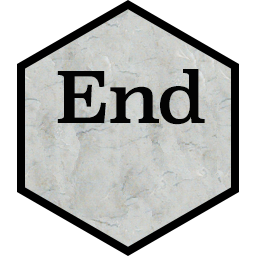
<style>
.page{position:relative;width:256px;height:256px;background:#ffffff}
.page>*{position:absolute;margin:0}
.t1{font:70px "Superclarendon-Regular";letter-spacing:-0.025em;color:#030303}
</style>
<div class="page">
<p class="t1" style="left:57px;top:69px;width:148px;height:56px">End</p>
</div>
